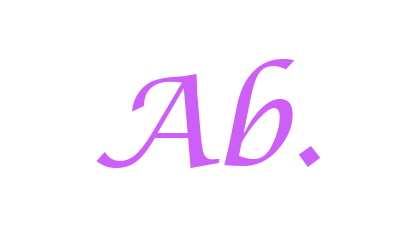
<style>
.page{position:relative;width:417px;height:250px;background:#ffffff}
.page>*{position:absolute;margin:0}
.t1{font:125px "LucidaCalligraphy-Italic";color:#cd5ff8}
</style>
<div class="page">
<p class="t1" style="left:96px;top:59px;width:225px;height:109px">Ab.</p>
</div>
